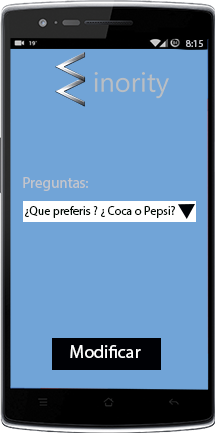
<style>
.page{position:relative;width:215px;height:433px;background:#71a4d7}
.page>*{position:absolute;margin:0}
.t1{font:10px "MyriadPro-Regular";color:#c4c5cb}
.t2{font:15px "MyriadPro-Regular";color:#c4c5cb}
.t3{font:12px "MyriadPro-Regular";color:#000903}
.t4{font:18px "MyriadPro-Regular";color:#ffffff}
</style>
<div class="page">
<p class="t1" style="left:186px;top:40px;width:17px;height:7px">8:15</p>
<p class="t2" style="left:23px;top:177px;width:65px;height:14px">Preguntas:</p>
<p class="t3" style="left:25px;top:206px;width:150px;height:12px">¿Que preferis ? ¿ Coca o Pepsi?</p>
<p class="t4" style="left:70px;top:345px;width:71px;height:13px">Modificar</p>
</div>
